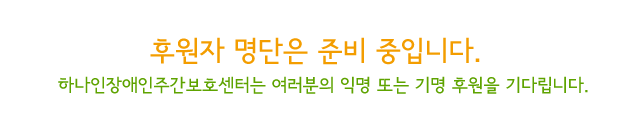
<style>
.page{position:relative;width:640px;height:128px;background:#ffffff}
.page>*{position:absolute;margin:0}
.t1{font:28px "SeoulNamsanB";color:#f39d00}
.t2{font:18px "SeoulNamsanB";color:#5ea300}
</style>
<div class="page">
<p class="t1" style="left:150px;top:37px;width:330px;height:28px">후원자 명단은 준비 중입니다.</p>
<p class="t2" style="left:58px;top:76px;width:530px;height:18px">하나인장애인주간보호센터는 여러분의 익명 또는 기명 후원을 기다립니다.</p>
</div>
